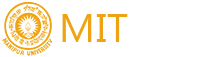
<style>
.page{position:relative;width:200px;height:57px;background:#ffffff}
.page>*{position:absolute;margin:0}
.t1{font:40px "MyanmarText";letter-spacing:0.02em;color:#eea412}
</style>
<div class="page">
<p class="t1" style="left:62px;top:14px;width:66px;height:28px">MIT</p>
</div>
